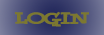
<style>
.page{position:relative;width:104px;height:35px}
.page>*{position:absolute;margin:0}
.t1{font:18.7px "VNI-Yahoo";letter-spacing:-0.05em;color:#7c7830}
</style>
<div class="page">
<p class="t1" style="left:15px;top:11px;width:74px;height:16px">LOGIN</p>
</div>
